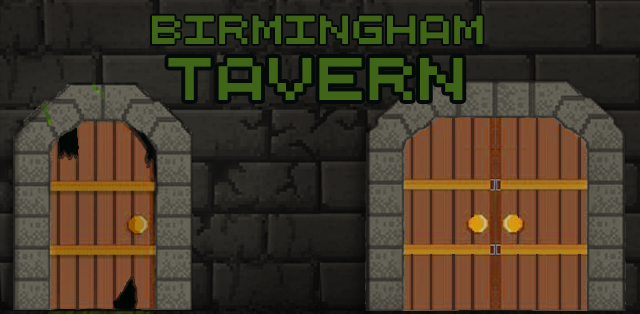
<style>
.page{position:relative;width:640px;height:314px}
.page>*{position:absolute;margin:0}
.t1{font:47.9px "QuinqueFive";color:#406516}
.t2{font:72px "QuinqueFive";color:#406516}
</style>
<div class="page">
<p class="t1" style="left:152px;top:15px;width:331px;height:29px">Birmingham</p>
<p class="t2" style="left:168px;top:58px;width:295px;height:42px">tavern</p>
</div>
